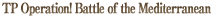
<style>
.page{position:relative;width:214px;height:19px;background:#ffffff}
.page>*{position:absolute;margin:0}
.t1{font:14px "RyuminPro-ExBold";letter-spacing:-0.08em;color:#6c573f;font-weight:bold;scale:0.8 1}
</style>
<div class="page">
<p class="t1" style="left:2px;top:2px;width:209px;height:14px">TP Operation! Battle of the Mediterranean</p>
</div>
